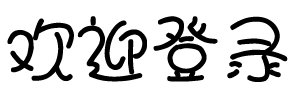
<style>
.page{position:relative;width:300px;height:100px;background:#ffffff}
.page>*{position:absolute;margin:0}
.t1{font:72px "JWaWAZuan";color:#000000}
</style>
<div class="page">
<p class="t1" style="left:7px;top:16px;width:281px;height:66px">欢迎登录</p>
</div>
